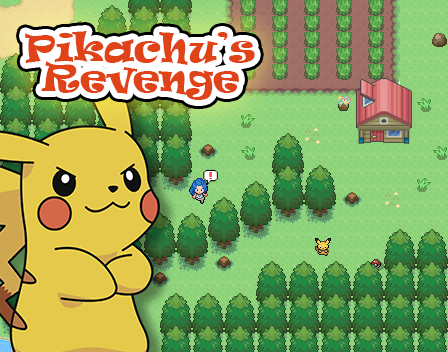
<style>
.page{position:relative;width:448px;height:352px}
.page>*{position:absolute;margin:0}
.t1{font:36px/30px "Ravie";color:#e14319}
</style>
<div class="page">
<p class="t1" style="left:25px;top:31px;width:230px;height:69px;text-align:center">Pikachu’s<br>Revenge</p>
</div>
